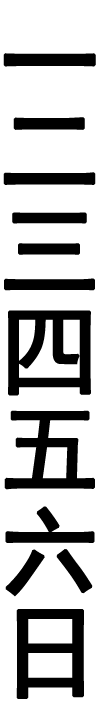
<style>
.page{position:relative;width:100px;height:702px;background:#ffffff}
.page>*{position:absolute;margin:0}
.t1{font:100px "SimHei";color:#000000;font-weight:bold}
</style>
<div class="page">
<p class="t1" style="left:3px;top:53px;width:93px;height:14px">一</p>
<p class="t1" style="left:3px;top:117px;width:93px;height:68px">二</p>
<p class="t1" style="left:4px;top:212px;width:91px;height:79px">三</p>
<p class="t1" style="left:8px;top:310px;width:83px;height:86px">四</p>
<p class="t1" style="left:4px;top:410px;width:91px;height:80px">五</p>
<p class="t1" style="left:5px;top:506px;width:90px;height:91px">六</p>
<p class="t1" style="left:16px;top:609px;width:68px;height:90px">日</p>
</div>
